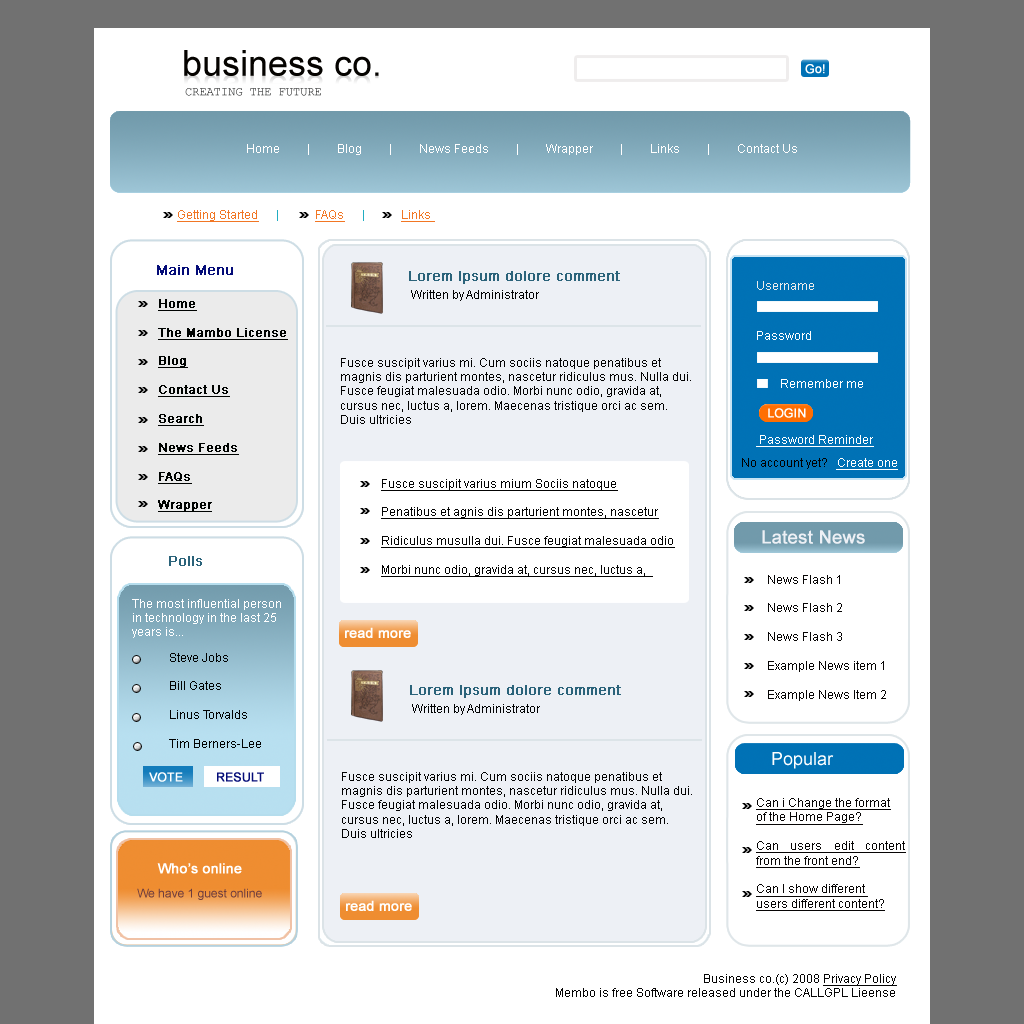
<style>
.page{position:relative;width:1024px;height:1024px;background:#ffffff}
.page>*{position:absolute;margin:0}
.t1{font:36px "ArialMT";color:#050300}
.t2{font:12px "ArialMT";color:#ffffff;font-weight:bold}
.t3{font:12px "CourierNewPSMT"}
.t4{font:12px "ArialMT";color:#fffefe}
.t5{font:12px "ArialMT";color:#f17624;text-decoration:underline}
.t6{font:12px "ArialMT";color:#21adc2}
.t7{font:12px "ArialMT";color:#f27623;text-decoration:underline}
.t8{font:14px "ArialMT";color:#040c78;font-weight:bold}
.t9{font:14px "ArialMT";color:#2b637a;font-weight:bold}
.t10{font:12px "ArialMT";color:#ebebeb}
.t11{font:12px "ArialMT";color:#020304}
.t12{font:12px "ArialMT";color:#000301;font-weight:bold;text-decoration:underline}
.t13{font:12px "ArialMT";color:#030303}
.t14{font:12px "ArialMT";color:#ffffff}
.t15{font:12px "ArialMT";color:#ffffff;text-decoration:underline}
.t16{font:12px "ArialMT";color:#020101}
.t17{font:12px "ArialMT";color:#030303;text-decoration:underline}
.t18{font:18px "ArialMT";color:#edf0f5;font-weight:bold}
.t19{font:12px "ArialMT";color:#070505}
.t20{font:14px "ArialMT";color:#ffffff;font-weight:bold}
.t21{font:12px "ArialMT";color:#010303}
.t22{font:18px "ArialMT";color:#ffffff}
.t23{font:12px "ArialMT";color:#040c78;font-weight:bold}
.t24{font:12px "ArialMT";color:#070505;text-decoration:underline}
.t25{font:12px "ArialMT";color:#6f3d3d}
.t26{font:12px "ArialMT";color:#050404}
.t27{font:12px "ArialMT";color:#050404;text-decoration:underline}
</style>
<div class="page">
<p class="t1" style="left:184px;top:50px;width:195px;height:26px">business co.</p>
<p class="t2" style="left:805px;top:64px;width:20px;height:10px">Go!</p>
<p class="t3" style="left:185px;top:88px;width:136px;height:8px">CREATING THE FUTURE</p>
<p class="t4" style="left:247px;top:144px;width:550px;height:11px">Home         |         Blog         |         News Feeds         |         Wrapper         |         Links         |         Contact Us</p>
<p class="t5" style="left:177px;top:210px;width:258px;height:12px">Getting Started <span class="t6">     |            </span><span class="t7">FAQs      </span><span class="t6">|            </span><span class="t7">Links</span></p>
<p class="t8" style="left:157px;top:265px;width:76px;height:10px">Main Menu</p>
<p class="t9" style="left:409px;top:271px;width:211px;height:13px">Lorem Ipsum dolore comment</p>
<p class="t10" style="left:757px;top:281px;width:57px;height:9px">Username</p>
<p class="t11" style="left:411px;top:290px;width:128px;height:11px">Written by Administrator</p>
<p class="t12" style="left:158px;top:299px;width:130px;height:213px">Home<br><br>The Mambo License<br><br>Blog<br><br>Contact Us<br><br>Search<br><br>News Feeds<br><br>FAQs<br><br>Wrapper</p>
<p class="t4" style="left:757px;top:331px;width:54px;height:9px">Password</p>
<p class="t13" style="left:341px;top:358px;width:350px;height:66px">Fusce suscipit varius mi. Cum sociis natoque penatibus et magnis dis parturient montes, nascetur ridiculus mus. Nulla dui. Fusce feugiat malesuada odio. Morbi nunc odio, gravida at, cursus nec, luctus a, lorem. Maecenas tristique orci ac sem. Duis ultricies</p>
<p class="t14" style="left:781px;top:379px;width:82px;height:9px">Remember me</p>
<p class="t2" style="left:768px;top:408px;width:38px;height:10px">LOGIN</p>
<p class="t15" style="left:756px;top:435px;width:118px;height:12px">Password Reminder</p>
<p class="t16" style="left:742px;top:458px;width:156px;height:12px">No account yet?   <span class="t15">Create one</span></p>
<p class="t17" style="left:381px;top:479px;width:294px;height:98px">Fusce suscipit varius mium Sociis natoque<br><br>Penatibus et agnis dis parturient montes, nascetur<br><br>Ridiculus musulla dui. Fusce feugiat malesuada odio<br><br>Morbi nunc odio, gravida at, cursus nec, luctus a,</p>
<p class="t18" style="left:762px;top:530px;width:103px;height:14px">Latest News</p>
<p class="t9" style="left:169px;top:556px;width:33px;height:10px">Polls</p>
<p class="t19" style="left:768px;top:575px;width:118px;height:126px;text-align:justify">News Flash 1<br><br>News Flash 2<br><br>News Flash 3<br><br>Example News item 1<br><br>Example News Item 2</p>
<p class="t14" style="left:132px;top:599px;width:149px;height:39px">The most influential person in technology in the last 25 years is...</p>
<p class="t20" style="left:345px;top:627px;width:66px;height:11px">read more</p>
<p class="t21" style="left:169px;top:653px;width:92px;height:95px">Steve Jobs<br><br>Bill Gates<br><br>Linus Torvalds<br><br>Tim Berners-Lee</p>
<p class="t9" style="left:410px;top:685px;width:211px;height:13px">Lorem Ipsum dolore comment</p>
<p class="t11" style="left:412px;top:704px;width:128px;height:11px">Written by Administrator</p>
<p class="t22" style="left:772px;top:752px;width:62px;height:17px">Popular</p>
<p class="t2" style="left:149px;top:772px;width:34px;height:10px">VOTE</p>
<p class="t23" style="left:217px;top:772px;width:47px;height:10px">RESULT</p>
<p class="t13" style="left:342px;top:772px;width:350px;height:66px">Fusce suscipit varius mi. Cum sociis natoque penatibus et magnis dis parturient montes, nascetur ridiculus mus. Nulla dui. Fusce feugiat malesuada odio. Morbi nunc odio, gravida at, cursus nec, luctus a, lorem. Maecenas tristique orci ac sem. Duis ultricies</p>
<p class="t24" style="left:756px;top:798px;width:150px;height:113px;text-align:justify">Can i Change the format<br>of the Home Page?<br><br>Can users edit content from the front end?<br><br>Can I show different <br>users different content?</p>
<p class="t20" style="left:157px;top:863px;width:85px;height:11px">Who’s online</p>
<p class="t25" style="left:137px;top:888px;width:125px;height:12px">We have 1 guest online</p>
<p class="t20" style="left:346px;top:900px;width:66px;height:11px">read more</p>
<p class="t26" style="left:556px;top:974px;width:341px;height:23px;text-align:right">Business co.(c) 2008 <span class="t27">Privacy Policy<br></span>Membo is free Software released under the CALLGPL Lieense</p>
</div>
